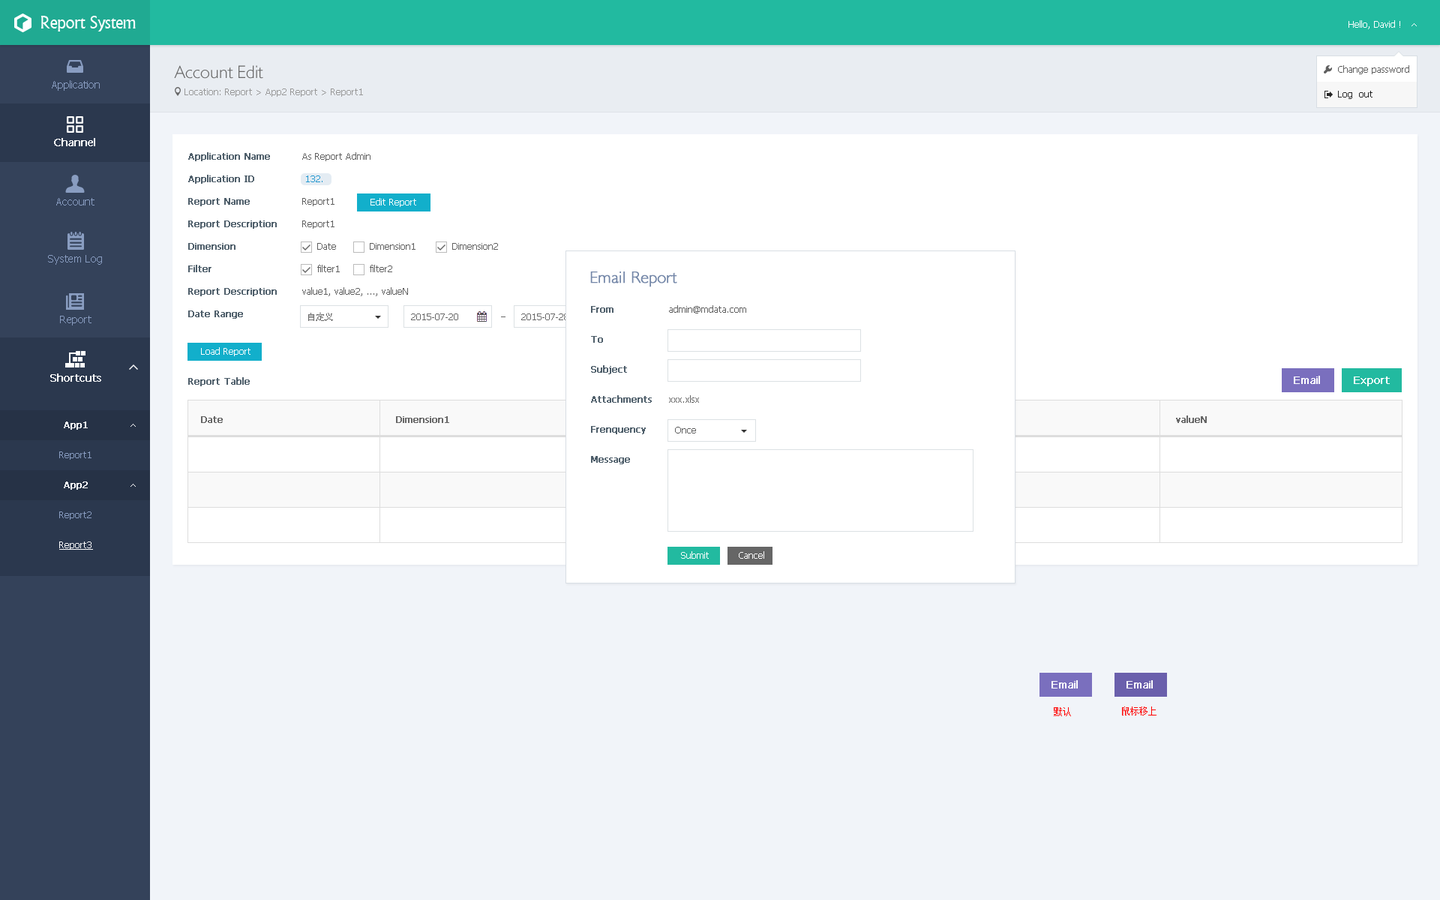
<style>
.page{position:relative;width:1440px;height:900px;background:#f1f4f9}
.page>*{position:absolute;margin:0}
.t1{font:18px "Narkisim";letter-spacing:-0.022em;color:#ffffff}
.t2{font:9px "Tahoma";color:#ffffff}
.t3{font:18px "084-CAI978";color:#666666}
.t4{font:9px "Tahoma";color:#5f5f5f}
.t5{font:10.5px "Tahoma";color:#899dc1}
.t6{font:9px "Tahoma";color:#999999}
.t7{font:9px "Tahoma";color:#262626}
.t8{font:10.5px "Tahoma";color:#ffffff;font-weight:bold}
.t9{font:9px "Tahoma";color:#4e5e6a;font-weight:bold}
.t10{font:9px "Tahoma";color:#2498d0}
.t11{font:16.5px "084-CAI978";color:#7487a8;font-weight:bold}
.t12{font:9px "AdobeHeitiStd-Regular";color:#666666}
.t13{font:9px "Tahoma";color:#666666}
.t14{font:9px "Tahoma";color:#ffffff;font-weight:bold}
.t15{font:9px "Tahoma";color:#666666;font-weight:bold}
.t16{font:9px "Tahoma";color:#899dc1}
.t17{font:9px "Tahoma";color:#ffffff;text-decoration:underline}
.t18{font:9px "SimSun";color:#ff0000}
</style>
<div class="page">
<p class="t1" style="left:40px;top:16px;width:96px;height:16px">Report System</p>
<p class="t2" style="left:1348px;top:20px;width:52px;height:9px">Hello, David !</p>
<p class="t3" style="left:174px;top:65px;width:89px;height:14px">Account Edit</p>
<p class="t4" style="left:1338px;top:65px;width:71px;height:9px">Change password</p>
<p class="t5" style="left:52px;top:80px;width:48px;height:11px">Application</p>
<p class="t6" style="left:184px;top:88px;width:179px;height:9px">Location: Report &gt; App2 Report &gt; Report1</p>
<p class="t7" style="left:1338px;top:91px;width:34px;height:8px">Log  out</p>
<p class="t8" style="left:54px;top:138px;width:41px;height:8px">Channel</p>
<p class="t9" style="left:188px;top:152px;width:82px;height:9px">Application Name</p>
<p class="t4" style="left:302px;top:152px;width:68px;height:9px">As Report Admin</p>
<p class="t9" style="left:188px;top:175px;width:66px;height:9px">Application ID</p>
<p class="t10" style="left:306px;top:176px;width:16px;height:6px">132.</p>
<p class="t5" style="left:56px;top:198px;width:38px;height:8px">Account</p>
<p class="t9" style="left:188px;top:198px;width:62px;height:8px">Report Name</p>
<p class="t4" style="left:302px;top:198px;width:32px;height:8px">Report1</p>
<p class="t2" style="left:370px;top:198px;width:46px;height:9px">Edit Report</p>
<p class="t9" style="left:188px;top:220px;width:89px;height:9px">Report Description</p>
<p class="t4" style="left:302px;top:220px;width:32px;height:9px">Report1</p>
<p class="t9" style="left:188px;top:243px;width:48px;height:7px">Dimension</p>
<p class="t4" style="left:317px;top:243px;width:19px;height:7px">Date</p>
<p class="t4" style="left:370px;top:243px;width:46px;height:7px">Dimension1</p>
<p class="t4" style="left:452px;top:243px;width:46px;height:7px">Dimension2</p>
<p class="t5" style="left:48px;top:255px;width:54px;height:10px">System Log</p>
<p class="t9" style="left:188px;top:265px;width:24px;height:7px">Filter</p>
<p class="t4" style="left:317px;top:265px;width:23px;height:7px">filter1</p>
<p class="t4" style="left:370px;top:265px;width:22px;height:7px">filter2</p>
<p class="t11" style="left:590px;top:272px;width:87px;height:15px">Email Report</p>
<p class="t9" style="left:188px;top:288px;width:89px;height:8px">Report Description</p>
<p class="t4" style="left:302px;top:287px;width:106px;height:9px">value1, value2, ..., valueN</p>
<p class="t4" style="left:669px;top:305px;width:77px;height:9px">admin@mdata.com</p>
<p class="t5" style="left:60px;top:316px;width:32px;height:10px">Report</p>
<p class="t9" style="left:188px;top:310px;width:55px;height:9px">Date Range</p>
<p class="t12" style="left:308px;top:313px;width:25px;height:8px">自定义</p>
<p class="t13" style="left:411px;top:314px;width:47px;height:6px">2015-07-20</p>
<p class="t13" style="left:521px;top:314px;width:47px;height:6px">2015-07-28</p>
<p class="t9" style="left:591px;top:306px;width:23px;height:7px">From</p>
<p class="t9" style="left:591px;top:336px;width:12px;height:7px">To</p>
<p class="t2" style="left:201px;top:347px;width:49px;height:9px">Load Report</p>
<p class="t9" style="left:591px;top:365px;width:36px;height:9px">Subject</p>
<p class="t8" style="left:50px;top:374px;width:51px;height:8px">Shortcuts</p>
<p class="t9" style="left:188px;top:377px;width:62px;height:9px">Report Table</p>
<p class="t8" style="left:1294px;top:376px;width:26px;height:8px">Email</p>
<p class="t8" style="left:1354px;top:376px;width:36px;height:10px">Export</p>
<p class="t9" style="left:591px;top:395px;width:61px;height:8px">Attachments</p>
<p class="t4" style="left:669px;top:395px;width:30px;height:8px">xxx.xlsx</p>
<p class="t14" style="left:64px;top:422px;width:24px;height:8px">App1</p>
<p class="t15" style="left:201px;top:416px;width:22px;height:7px">Date</p>
<p class="t15" style="left:396px;top:416px;width:53px;height:7px">Dimension1</p>
<p class="t15" style="left:1176px;top:416px;width:31px;height:7px">valueN</p>
<p class="t9" style="left:591px;top:426px;width:55px;height:8px">Frenquency</p>
<p class="t4" style="left:675px;top:427px;width:21px;height:7px">Once</p>
<p class="t16" style="left:59px;top:452px;width:33px;height:8px">Report1</p>
<p class="t9" style="left:591px;top:456px;width:39px;height:8px">Message</p>
<p class="t14" style="left:64px;top:482px;width:24px;height:8px">App2</p>
<p class="t16" style="left:59px;top:512px;width:33px;height:8px">Report2</p>
<p class="t17" style="left:59px;top:542px;width:34px;height:8px">Report3</p>
<p class="t2" style="left:681px;top:551px;width:28px;height:8px">Submit</p>
<p class="t2" style="left:739px;top:551px;width:25px;height:8px">Cancel</p>
<p class="t8" style="left:1052px;top:680px;width:26px;height:8px">Email</p>
<p class="t8" style="left:1126px;top:680px;width:27px;height:8px">Email</p>
<p class="t18" style="left:1054px;top:707px;width:17px;height:9px">默认</p>
<p class="t18" style="left:1122px;top:706px;width:34px;height:10px">鼠标移上</p>
</div>
